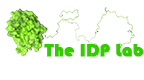
<style>
.page{position:relative;width:144px;height:80px;background:#ffffff}
.page>*{position:absolute;margin:0}
.t1{font:18px "Bauhaus93";color:#33cc00;font-weight:bold}
</style>
<div class="page">
<p class="t1" style="left:44px;top:44px;width:100px;height:13px">The IDP Lab</p>
</div>
